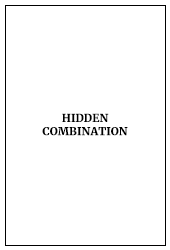
<style>
.page{position:relative;width:170px;height:250px;background:#ffffff}
.page>*{position:absolute;margin:0}
.t1{font:11px "Merriweather-Black";color:#000000;text-transform:uppercase}
</style>
<div class="page">
<p class="t1" style="left:42px;top:113px;width:86px;height:23px;text-align:center">HIDDEN <br>COMBINATION</p>
</div>
